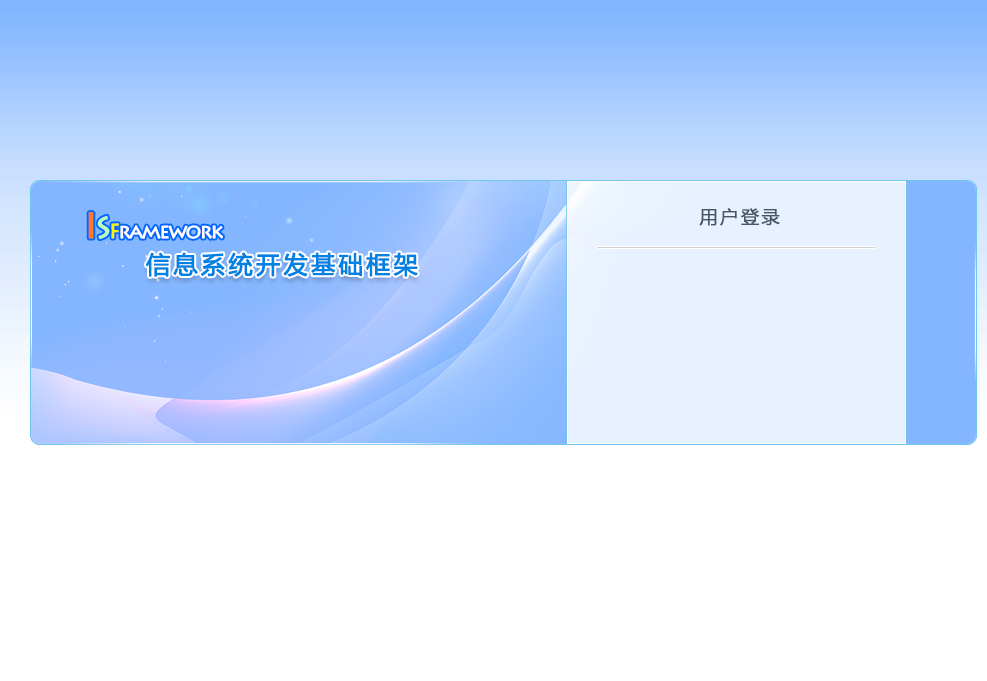
<style>
.page{position:relative;width:987px;height:681px;background:#ffffff}
.page>*{position:absolute;margin:0}
.t1{font:18px "MicrosoftYaHei";letter-spacing:0.12em;color:#475763;font-weight:bold}
.t2{font:20px "LithosPro-Regular";letter-spacing:-0.1em;color:#ffffff;font-weight:bold}
.t3{font:36px "LithosPro-Regular";letter-spacing:-0.1em;color:#ff7a21;font-weight:bold}
.t4{font:30px "LithosPro-Regular";letter-spacing:-0.1em;color:#bbfebd;font-weight:bold}
.t5{font:20px "LithosPro-Regular";letter-spacing:-0.1em;color:#f8f500;font-weight:bold}
.t6{font:24px "MicrosoftYaHei";letter-spacing:0.12em;color:#0082e4;font-weight:bold}
</style>
<div class="page">
<p class="t1" style="left:699px;top:208px;width:81px;height:18px">用户登录</p>
<p class="t2" style="left:88px;top:212px;width:135px;height:28px"><span class="t3">I</span><span class="t4">S</span><span class="t5">F</span>ramework</p>
<p class="t6" style="left:145px;top:252px;width:273px;height:25px">信息系统开发基础框架</p>
</div>
